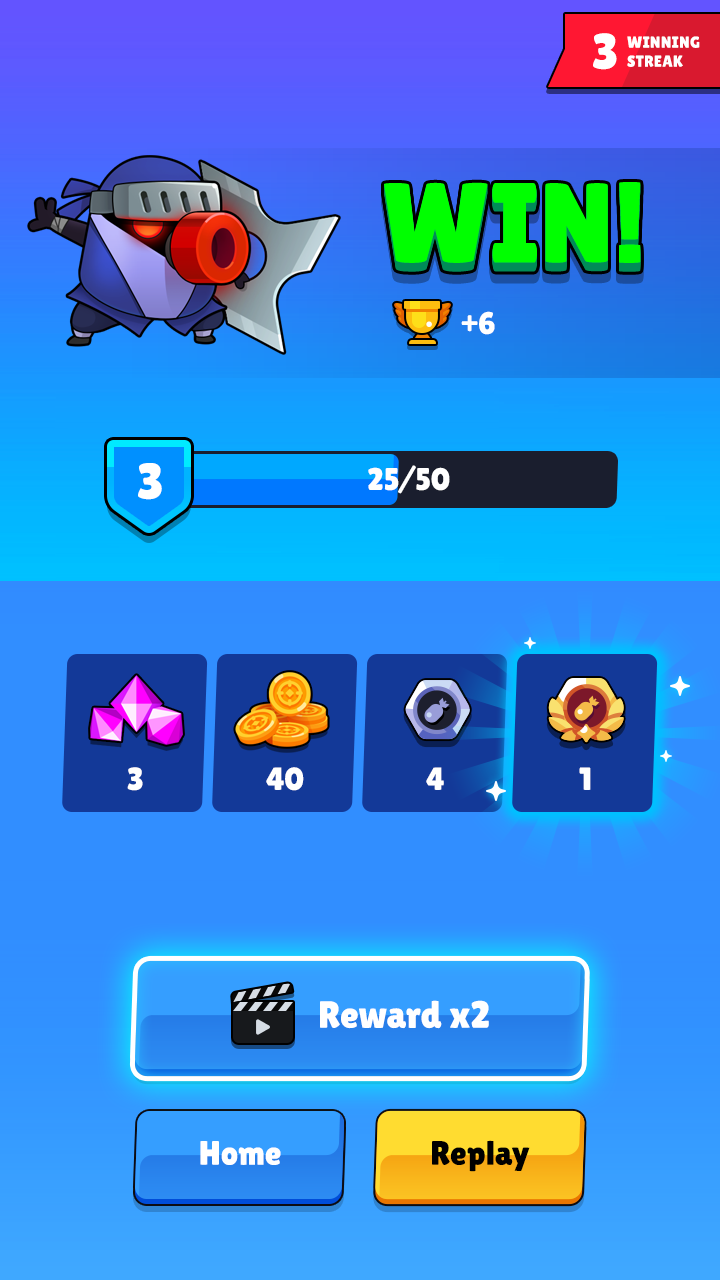
<style>
.page{position:relative;width:720px;height:1280px}
.page>*{position:absolute;margin:0}
.t1{font:50px "LilitaOne";color:#ffffff;text-transform:uppercase}
.t2{font:16px "LilitaOne";color:#ffffff;text-transform:uppercase}
.t3{font:113.1px "LilitaOne";color:#00ff00}
.t4{font:31.2px "LilitaOne";color:#ffffff}
.t5{font:50.6px "LilitaOne";color:#ffffff}
.t6{font:31.2px "LilitaOne";color:#ffffff;text-transform:uppercase}
.t7{font:32px "LilitaOne";color:#ffffff;text-transform:uppercase}
.t8{font:38px "LilitaOne";color:#ffffff}
.t9{font:34px "LilitaOne";color:#ffffff}
.t10{font:34px "LilitaOne";color:#000000}
</style>
<div class="page">
<p class="t1" style="left:593px;top:33px;width:24px;height:37px">3</p>
<p class="t2" style="left:627px;top:36px;width:73px;height:31px">Winning<br>streak</p>
<p class="t3" style="left:384px;top:185px;width:257px;height:82px">WIN!</p>
<p class="t3" style="left:384px;top:184px;width:257px;height:82px">WIN!</p>
<p class="t3" style="left:384px;top:183px;width:257px;height:81px">WIN!</p>
<p class="t3" style="left:384px;top:182px;width:257px;height:81px">WIN!</p>
<p class="t3" style="left:384px;top:190px;width:257px;height:82px">WIN!</p>
<p class="t3" style="left:384px;top:189px;width:257px;height:82px">WIN!</p>
<p class="t3" style="left:384px;top:188px;width:257px;height:82px">WIN!</p>
<p class="t3" style="left:384px;top:187px;width:257px;height:82px">WIN!</p>
<p class="t3" style="left:384px;top:186px;width:257px;height:82px">WIN!</p>
<p class="t4" style="left:461px;top:311px;width:34px;height:24px">+6</p>
<p class="t5" style="left:138px;top:463px;width:24px;height:37px">3</p>
<p class="t6" style="left:368px;top:465px;width:82px;height:29px">25/50</p>
<p class="t7" style="left:127px;top:767px;width:16px;height:24px">3</p>
<p class="t7" style="left:266px;top:767px;width:38px;height:24px">40</p>
<p class="t7" style="left:426px;top:767px;width:18px;height:23px">4</p>
<p class="t7" style="left:579px;top:767px;width:12px;height:23px">1</p>
<p class="t8" style="left:320px;top:1000px;width:169px;height:29px">Reward x2</p>
<p class="t9" style="left:200px;top:1141px;width:81px;height:24px">Home</p>
<p class="t10" style="left:432px;top:1140px;width:98px;height:32px">Replay</p>
</div>
